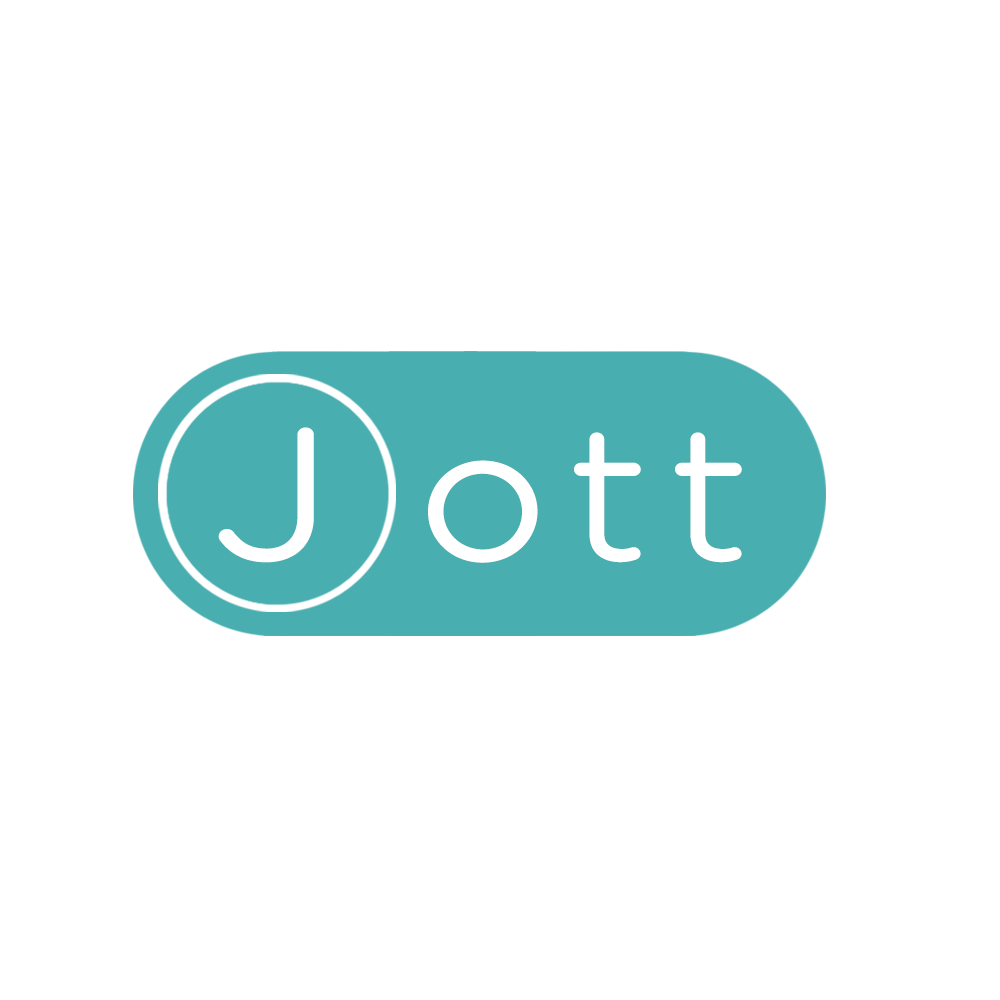
<style>
.page{position:relative;width:1000px;height:1000px;background:#ffffff}
.page>*{position:absolute;margin:0}
.t1{font:181.6px "GothamRounded-Light";letter-spacing:0.081em;color:#ffffff;font-weight:bold;scale:1.1 1}
.t2{font:181.6px "GothamRounded-Light";letter-spacing:0.025em;color:#ffffff;font-weight:bold;scale:1.2 1}
</style>
<div class="page">
<p class="t1" style="left:218px;top:427px;width:524px;height:136px"><span class="t2">J </span>ott</p>
</div>
